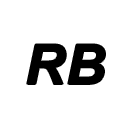
<style>
.page{position:relative;width:128px;height:128px;background:#ffffff}
.page>*{position:absolute;margin:0}
.t1{font:55.2px "Arial-BoldItalicMT";letter-spacing:0.02em;color:#000000}
</style>
<div class="page">
<p class="t1" style="left:27px;top:44px;width:78px;height:40px">RB</p>
</div>
